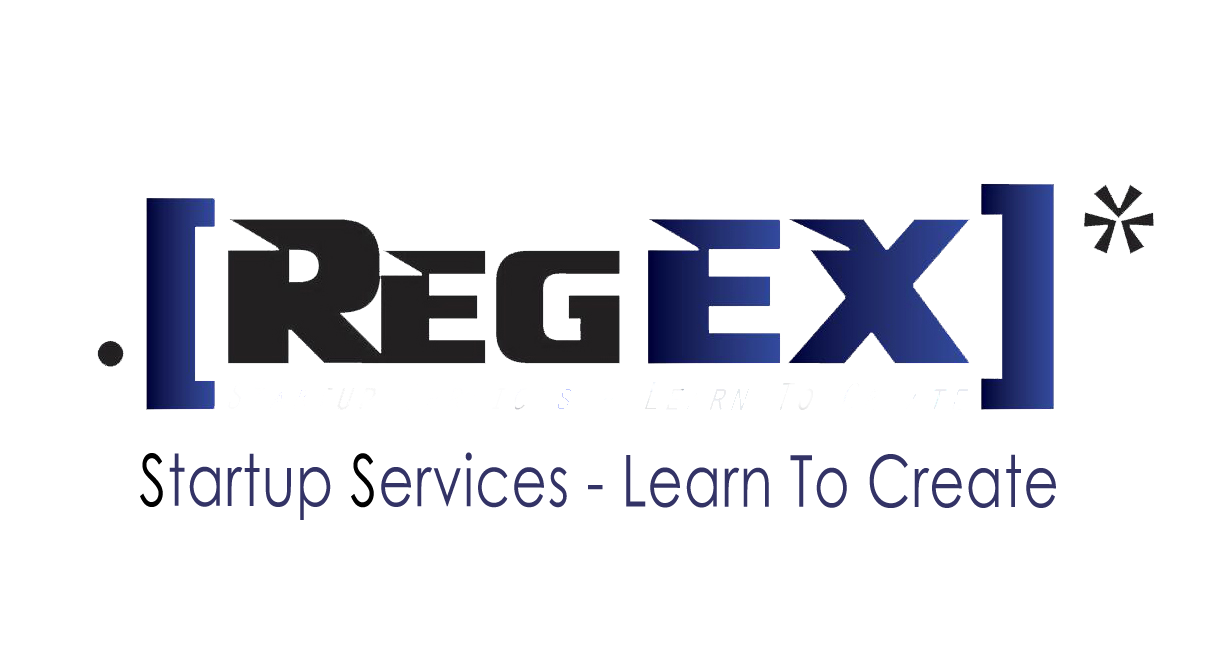
<style>
.page{position:relative;width:1224px;height:650px;background:#ffffff}
.page>*{position:absolute;margin:0}
.t1{font:71.6px "CenturyGothic";letter-spacing:0.02em;color:#333366;scale:0.76 1}
.t2{font:71.6px "CenturyGothic";letter-spacing:0.02em;color:#000000;scale:0.76 1}
</style>
<div class="page">
<p class="t1" style="left:140px;top:452px;width:916px;height:68px"><span class="t2">S</span>tartup <span class="t2">S</span>ervices - Learn To Create</p>
</div>
